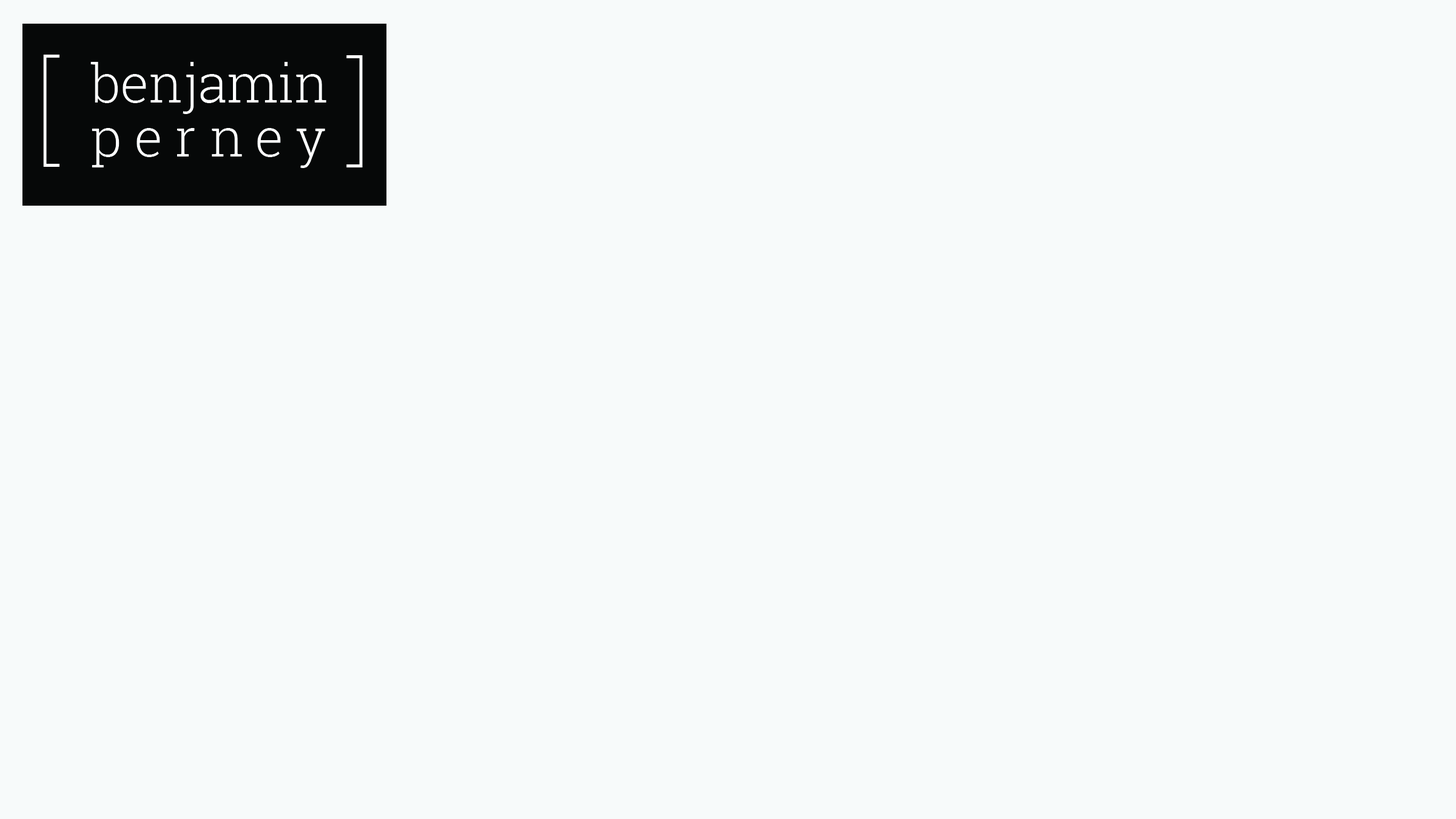
<style>
.page{position:relative;width:1456px;height:819px;background:#f7fafa}
.page>*{position:absolute;margin:0}
.t1{font:115.9px "RobotoSlab-Thin";color:#ffffff}
.t2{font:53.1px "RobotoSlab-Light";color:#ffffff}
.t3{font:53.1px "RobotoSlab-Light";letter-spacing:0.26em;color:#ffffff}
</style>
<div class="page">
<p class="t1" style="left:43px;top:55px;width:17px;height:112px">[</p>
<p class="t2" style="left:90px;top:62px;width:236px;height:52px">benjamin</p>
<p class="t1" style="left:346px;top:55px;width:17px;height:112px">]</p>
<p class="t3" style="left:92px;top:128px;width:233px;height:40px">perney</p>
</div>
